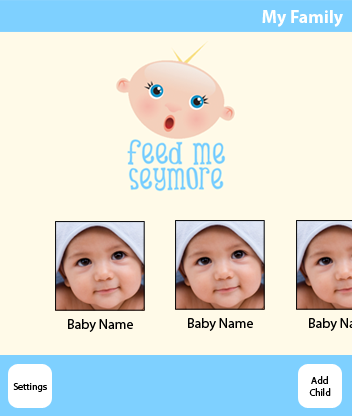
<style>
.page{position:relative;width:352px;height:416px;background:#fffae8}
.page>*{position:absolute;margin:0}
.t1{font:18px "MyriadPro-Bold";color:#ffffff}
.t2{font:14px "MyriadPro-Regular";color:#000000}
.t3{font:10px "MyriadPro-Regular";color:#000000}
</style>
<div class="page">
<p class="t1" style="left:262px;top:10px;width:81px;height:17px">My Family</p>
<p class="t2" style="left:188px;top:318px;width:65px;height:13px">Baby Name</p>
<p class="t2" style="left:68px;top:319px;width:65px;height:13px">Baby Name</p>
<p class="t3" style="left:309px;top:376px;width:22px;height:20px;text-align:center">Add<br>Child</p>
<p class="t3" style="left:13px;top:383px;width:34px;height:9px">Settings</p>
</div>
